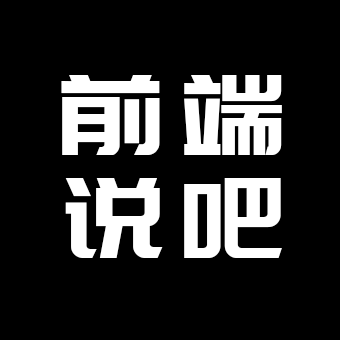
<style>
.page{position:relative;width:340px;height:340px;background:#000000}
.page>*{position:absolute;margin:0}
.t1{font:111.1px "PangMenZhengDao";letter-spacing:-0.176em;color:#ffffff}
</style>
<div class="page">
<p class="t1" style="left:61px;top:75px;width:221px;height:80px">前 端</p>
<p class="t1" style="left:65px;top:178px;width:217px;height:80px">说 吧</p>
</div>
